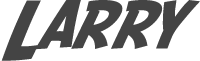
<style>
.page{position:relative;width:200px;height:61px;background:#ffffff}
.page>*{position:absolute;margin:0}
.t1{font:67.8px "SFFedora";letter-spacing:-0.03em;color:#444444}
</style>
<div class="page">
<p class="t1" style="left:1px;top:0px;width:199px;height:61px">Larry</p>
</div>
